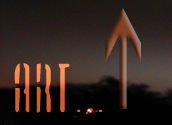
<style>
.page{position:relative;width:172px;height:125px}
.page>*{position:absolute;margin:0}
.t1{font:72px "Devil'sHandshake"}
</style>
<div class="page">
<p class="t1" style="left:14px;top:63px;width:89px;height:50px">ART...</p>
</div>
